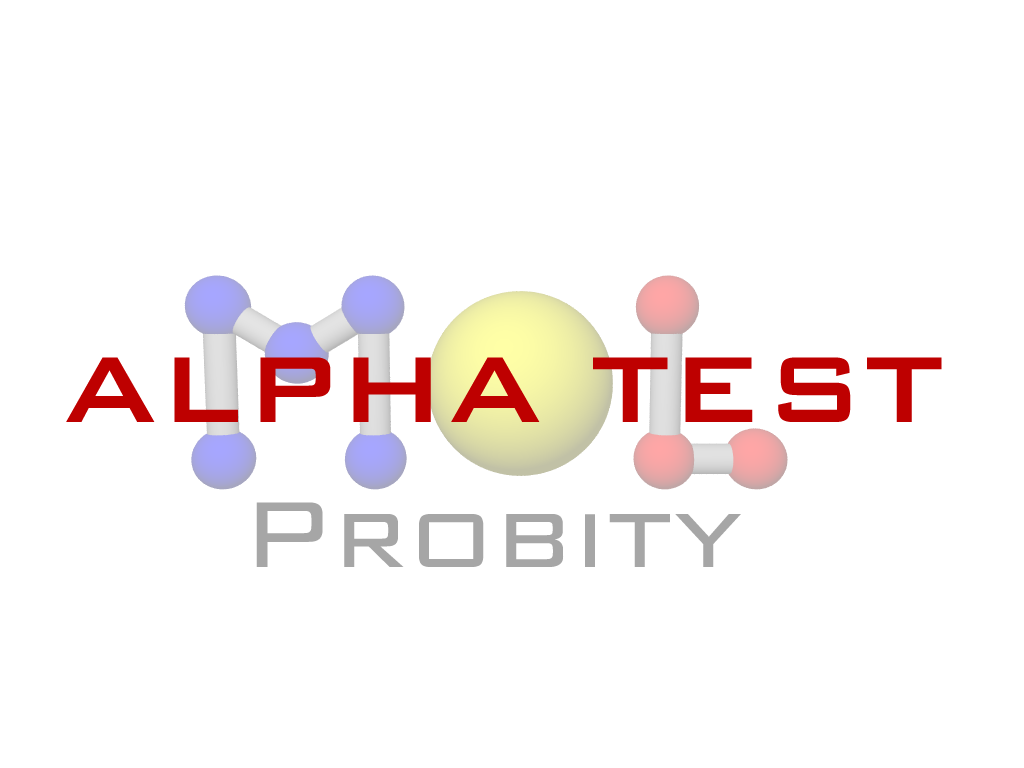
<style>
.page{position:relative;width:1024px;height:768px;background:#ffffff}
.page>*{position:absolute;margin:0}
.t1{font:125px "BankGothic-Medium";color:#be0000}
.t2{font:125px "BankGothicBT-Light";color:#a6a6a6}
</style>
<div class="page">
<p class="t1" style="left:66px;top:357px;width:876px;height:65px">ALPHA TEST</p>
<p class="t2" style="left:256px;top:502px;width:485px;height:65px">Probity</p>
</div>
